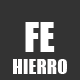
<style>
.page{position:relative;width:80px;height:80px;background:#333333}
.page>*{position:absolute;margin:0}
.t1{font:38.4px "Impact";color:#ffffff}
.t2{font:19.2px "Impact";color:#fffefe}
</style>
<div class="page">
<p class="t1" style="left:25px;top:22px;width:30px;height:30px">FE</p>
<p class="t2" style="left:13px;top:59px;width:54px;height:15px">HIERRO</p>
</div>
